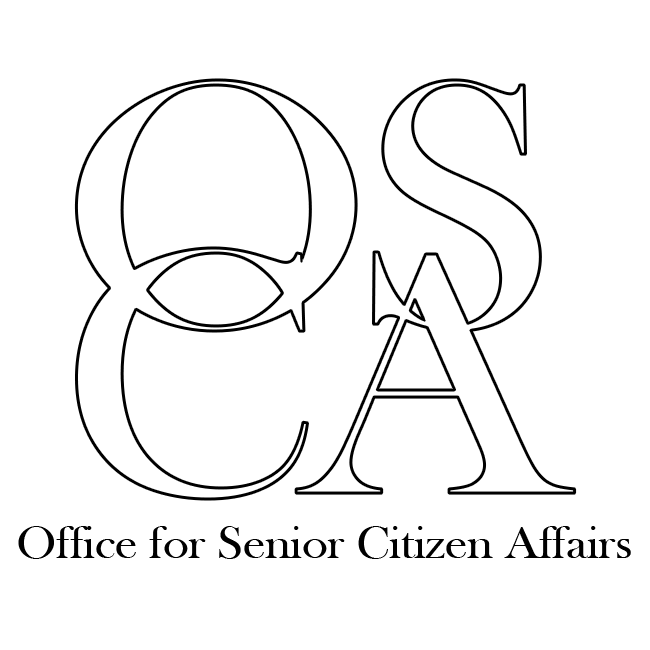
<style>
.page{position:relative;width:650px;height:650px;background:#ffffff}
.page>*{position:absolute;margin:0}
.t1{font:46px "BaskOldFace";letter-spacing:-0.01em;color:#000000;scale:1.09 1}
</style>
<div class="page">
<p class="t1" style="left:18px;top:526px;width:613px;height:33px">Office for Senior Citizen Affairs</p>
</div>
